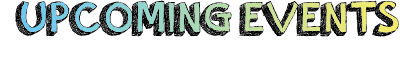
<style>
.page{position:relative;width:415px;height:60px;background:#ffffff}
.page>*{position:absolute;margin:0}
.t1{font:48px "orangejuice";color:#000000}
</style>
<div class="page">
<p class="t1" style="left:15px;top:0px;width:384px;height:37px">UPCOMING EVENTS</p>
</div>
